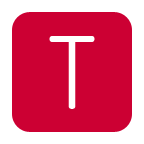
<style>
.page{position:relative;width:144px;height:144px;background:#cc0033}
.page>*{position:absolute;margin:0}
.t1{font:100px "TerminalDosis-Book";color:#ffffff}
</style>
<div class="page">
<p class="t1" style="left:49px;top:36px;width:46px;height:73px">T</p>
</div>
